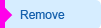
<style>
.page{position:relative;width:101px;height:28px;background:#d6edff}
.page>*{position:absolute;margin:0}
.t1{font:12px "ArialMT";color:#1661ad}
</style>
<div class="page">
<p class="t1" style="left:20px;top:10px;width:45px;height:9px">Remove</p>
</div>
